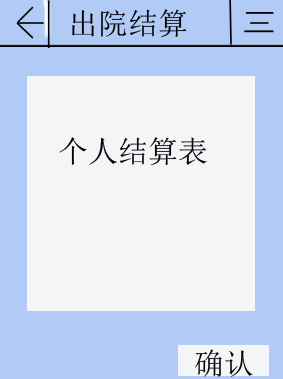
<style>
.page{position:relative;width:283px;height:379px;background:#f4f5f7}
.page>*{position:absolute;margin:0}
.t1{font:30.1px "SimSun";color:#000000}
.t2{font:30px "SimSun";color:#000206}
</style>
<div class="page">
<p class="t1" style="left:71px;top:9px;width:116px;height:29px">出院结算</p>
<p class="t2" style="left:59px;top:137px;width:148px;height:29px">个人结算表</p>
<p class="t2" style="left:195px;top:349px;width:58px;height:28px">确认</p>
</div>
